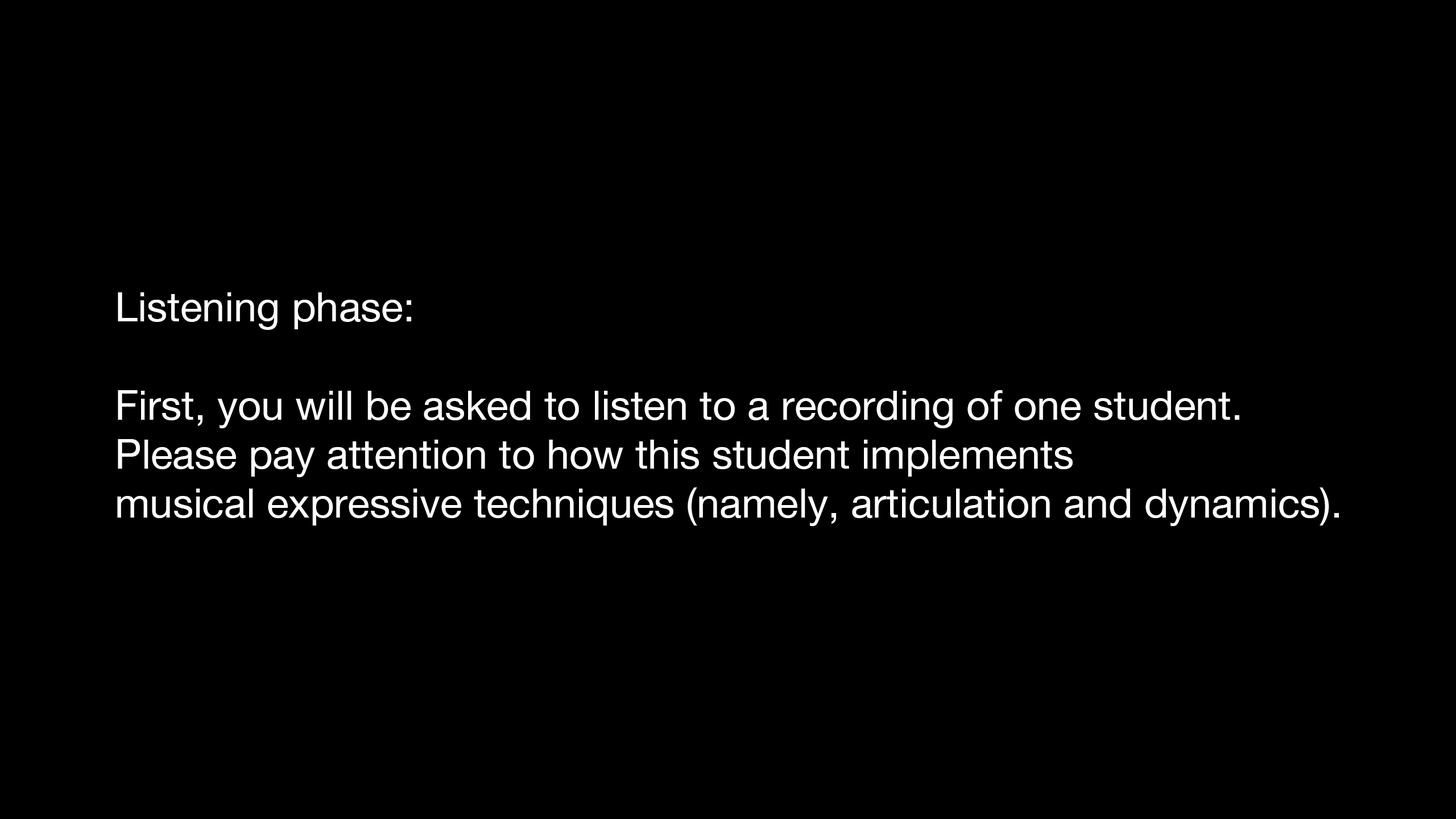
<style>
.page{position:relative;width:1456px;height:819px;background:#000000}
.page>*{position:absolute;margin:0}
.t1{font:40.9px "HelveticaNeue";color:#ffffff}
</style>
<div class="page">
<p class="t1" style="left:117px;top:292px;width:1222px;height:234px">Listening phase:<br><br>First, you will be asked to listen to a recording of one student.<br>Please pay attention to how this student implements<br>musical expressive techniques (namely, articulation and dynamics).</p>
</div>
